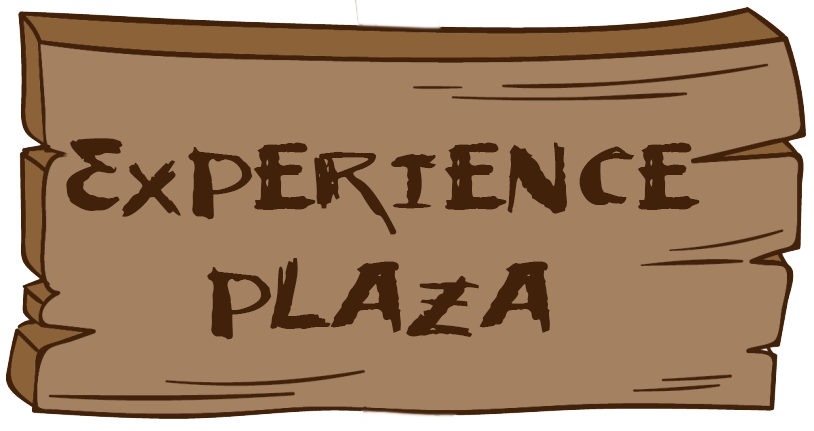
<style>
.page{position:relative;width:814px;height:431px;background:#a38161}
.page>*{position:absolute;margin:0}
.t1{font:100px "VtksDecision";color:#42210b}
</style>
<div class="page">
<p class="t1" style="left:66px;top:138px;width:634px;height:202px;text-align:center">Experience<br>plaza</p>
</div>
